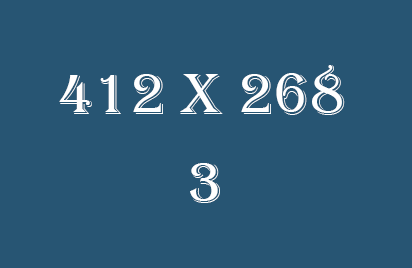
<style>
.page{position:relative;width:412px;height:268px;background:#275573}
.page>*{position:absolute;margin:0}
.t1{font:60px "Algerian";color:#ffffff}
</style>
<div class="page">
<p class="t1" style="left:59px;top:65px;width:286px;height:50px">268 x 412</p>
<p class="t1" style="left:190px;top:163px;width:30px;height:40px">3</p>
</div>
